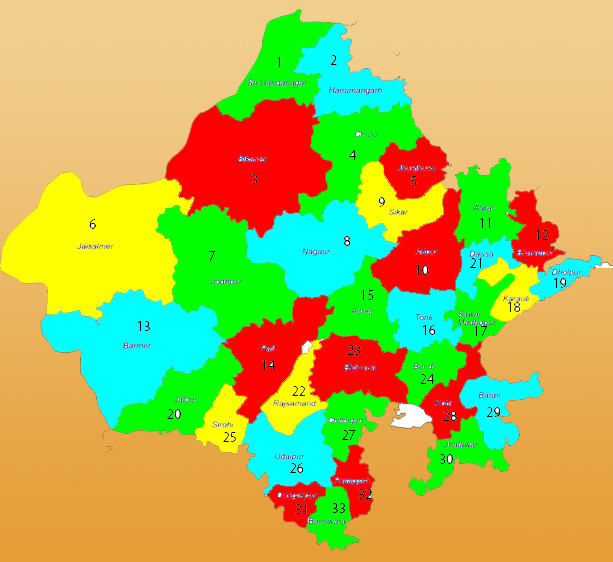
<style>
.page{position:relative;width:613px;height:562px}
.page>*{position:absolute;margin:0}
.t1{font:14px "MyriadPro-Regular";color:#000000}
.t2{font:14px "MyriadPro-Regular";color:#002000}
.t3{font:14px "MyriadPro-Regular";color:#111100}
.t4{font:14px "MyriadPro-Regular";color:#001900}
.t5{font:14px "MyriadPro-Regular";color:#202000}
.t6{font:14px "MyriadPro-Regular";color:#1d1d00}
</style>
<div class="page">
<p class="t1" style="left:277px;top:57px;width:4px;height:10px">1</p>
<p class="t1" style="left:330px;top:55px;width:7px;height:10px">2</p>
<p class="t2" style="left:349px;top:150px;width:8px;height:10px">4</p>
<p class="t1" style="left:251px;top:174px;width:7px;height:10px">3</p>
<p class="t1" style="left:410px;top:176px;width:7px;height:10px">5</p>
<p class="t3" style="left:378px;top:197px;width:7px;height:10px">9</p>
<p class="t1" style="left:89px;top:219px;width:7px;height:10px">6</p>
<p class="t1" style="left:479px;top:218px;width:12px;height:10px">11</p>
<p class="t1" style="left:535px;top:230px;width:14px;height:10px">12</p>
<p class="t1" style="left:344px;top:236px;width:7px;height:10px">8</p>
<p class="t1" style="left:209px;top:251px;width:6px;height:10px">7</p>
<p class="t1" style="left:415px;top:265px;width:14px;height:10px">10</p>
<p class="t1" style="left:470px;top:258px;width:12px;height:10px">21</p>
<p class="t1" style="left:553px;top:278px;width:14px;height:10px">19</p>
<p class="t4" style="left:361px;top:290px;width:13px;height:10px">15</p>
<p class="t5" style="left:507px;top:302px;width:14px;height:10px">18</p>
<p class="t1" style="left:137px;top:321px;width:13px;height:10px">13</p>
<p class="t1" style="left:422px;top:325px;width:14px;height:10px">16</p>
<p class="t1" style="left:474px;top:326px;width:13px;height:10px">17</p>
<p class="t1" style="left:347px;top:345px;width:14px;height:10px">23</p>
<p class="t1" style="left:262px;top:360px;width:14px;height:10px">14</p>
<p class="t2" style="left:420px;top:374px;width:15px;height:10px">24</p>
<p class="t6" style="left:292px;top:386px;width:14px;height:10px">22</p>
<p class="t1" style="left:167px;top:409px;width:14px;height:10px">20</p>
<p class="t1" style="left:443px;top:411px;width:14px;height:10px">28</p>
<p class="t1" style="left:486px;top:407px;width:15px;height:10px">29</p>
<p class="t1" style="left:223px;top:432px;width:13px;height:10px">25</p>
<p class="t1" style="left:342px;top:430px;width:13px;height:10px">27</p>
<p class="t1" style="left:439px;top:454px;width:14px;height:10px">30</p>
<p class="t1" style="left:290px;top:463px;width:14px;height:10px">26</p>
<p class="t1" style="left:358px;top:489px;width:14px;height:10px">32</p>
<p class="t1" style="left:295px;top:504px;width:12px;height:10px">31</p>
</div>
